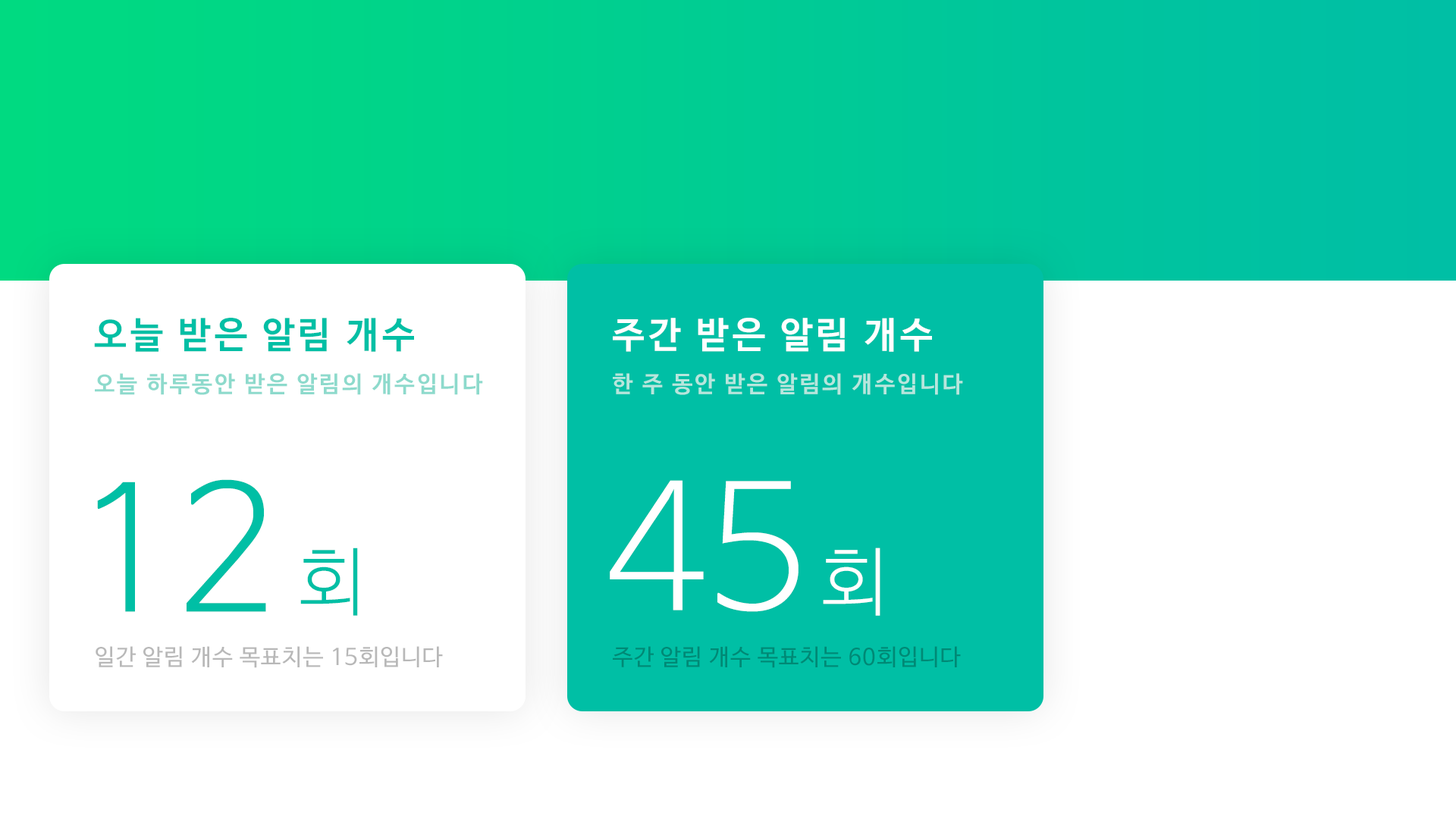
<style>
.page{position:relative;width:1456px;height:819px;background:#ffffff}
.page>*{position:absolute;margin:0}
.t1{font:36.4px "NanumBarunGothicBold";letter-spacing:0.1em;color:#00bfa5}
.t2{font:36.4px "NanumBarunGothicBold";letter-spacing:0.1em;color:#ffffff}
.t3{font:22.7px "NanumBarunGothicBold";letter-spacing:0.1em;color:#8ddacc}
.t4{font:22.7px "NanumBarunGothicBold";letter-spacing:0.1em;color:#b7e6dd}
.t5{font:172.1px "NanumBarunGothicLight";color:#00bfa5}
.t6{font:172.1px "NanumBarunGothicLight";color:#ffffff}
.t7{font:74.3px "NanumBarunGothicLight";color:#00bfa5}
.t8{font:74.3px "NanumBarunGothicLight";color:#ffffff}
.t9{font:22.7px "NanumBarunGothic";letter-spacing:0.04em;color:#b8b8b8}
.t10{font:22.7px "NanumBarunGothic";letter-spacing:0.04em;color:#008975}
</style>
<div class="page">
<p class="t1" style="left:94px;top:318px;width:320px;height:34px">오늘 받은 알림 개수</p>
<p class="t2" style="left:613px;top:318px;width:319px;height:34px">주간 받은 알림 개수</p>
<p class="t3" style="left:95px;top:373px;width:388px;height:22px">오늘 하루동안 받은 알림의 개수입니다</p>
<p class="t4" style="left:613px;top:373px;width:350px;height:22px">한 주 동안 받은 알림의 개수입니다</p>
<p class="t5" style="left:97px;top:479px;width:169px;height:133px">12</p>
<p class="t6" style="left:610px;top:480px;width:189px;height:132px">45</p>
<p class="t7" style="left:300px;top:548px;width:58px;height:68px">회</p>
<p class="t8" style="left:823px;top:548px;width:57px;height:68px">회</p>
<p class="t9" style="left:96px;top:646px;width:347px;height:22px">일간 알림 개수 목표치는 15회입니다</p>
<p class="t10" style="left:613px;top:646px;width:348px;height:22px">주간 알림 개수 목표치는 60회입니다</p>
</div>
